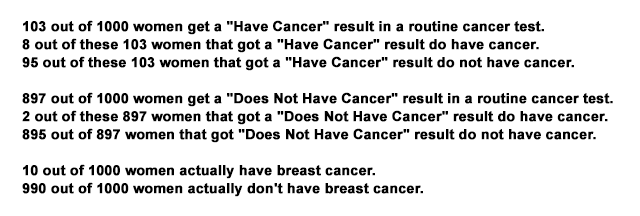
<style>
.page{position:relative;width:640px;height:216px;background:#ffffff}
.page>*{position:absolute;margin:0}
.t1{font:14px/18px "Arial-BoldMT";color:#000000;font-weight:bold}
</style>
<div class="page">
<p class="t1" style="left:22px;top:20px;width:591px;height:177px">103 out of 1000 women get a "Have Cancer" result in a routine cancer test.<br>8 out of these 103 women that got a "Have Cancer" result do have cancer.<br>95 out of these 103 women that got a "Have Cancer" result do not have cancer.<br><br>897 out of 1000 women get a "Does Not Have Cancer" result in a routine cancer test.<br>2 out of these 897 women that got a "Does Not Have Cancer" result do have cancer. <br>895 out of 897 women that got "Does Not Have Cancer" result do not have cancer.<br><br>10 out of 1000 women actually have breast cancer.<br>990 out of 1000 women actually don't have breast cancer.</p>
</div>
